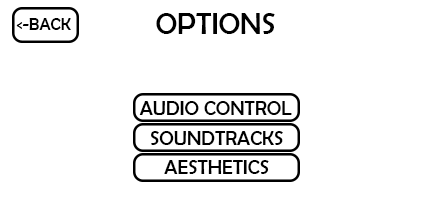
<style>
.page{position:relative;width:432px;height:216px;background:#ffffff}
.page>*{position:absolute;margin:0}
.t1{font:30px "BerlinSansFB-Reg";color:#000000}
.t2{font:17px "BerlinSansFB-Reg";color:#000000}
.t3{font:20px "BerlinSansFB-Reg";color:#000000}
</style>
<div class="page">
<p class="t1" style="left:156px;top:13px;width:119px;height:21px">OPTIONS</p>
<p class="t2" style="left:16px;top:18px;width:55px;height:12px">&lt;-BACK</p>
<p class="t3" style="left:139px;top:101px;width:153px;height:14px">AUDIO CONTROL</p>
<p class="t3" style="left:151px;top:131px;width:132px;height:14px">SOUNDTRACKS</p>
<p class="t3" style="left:164px;top:160px;width:105px;height:14px">AESTHETICS</p>
</div>
